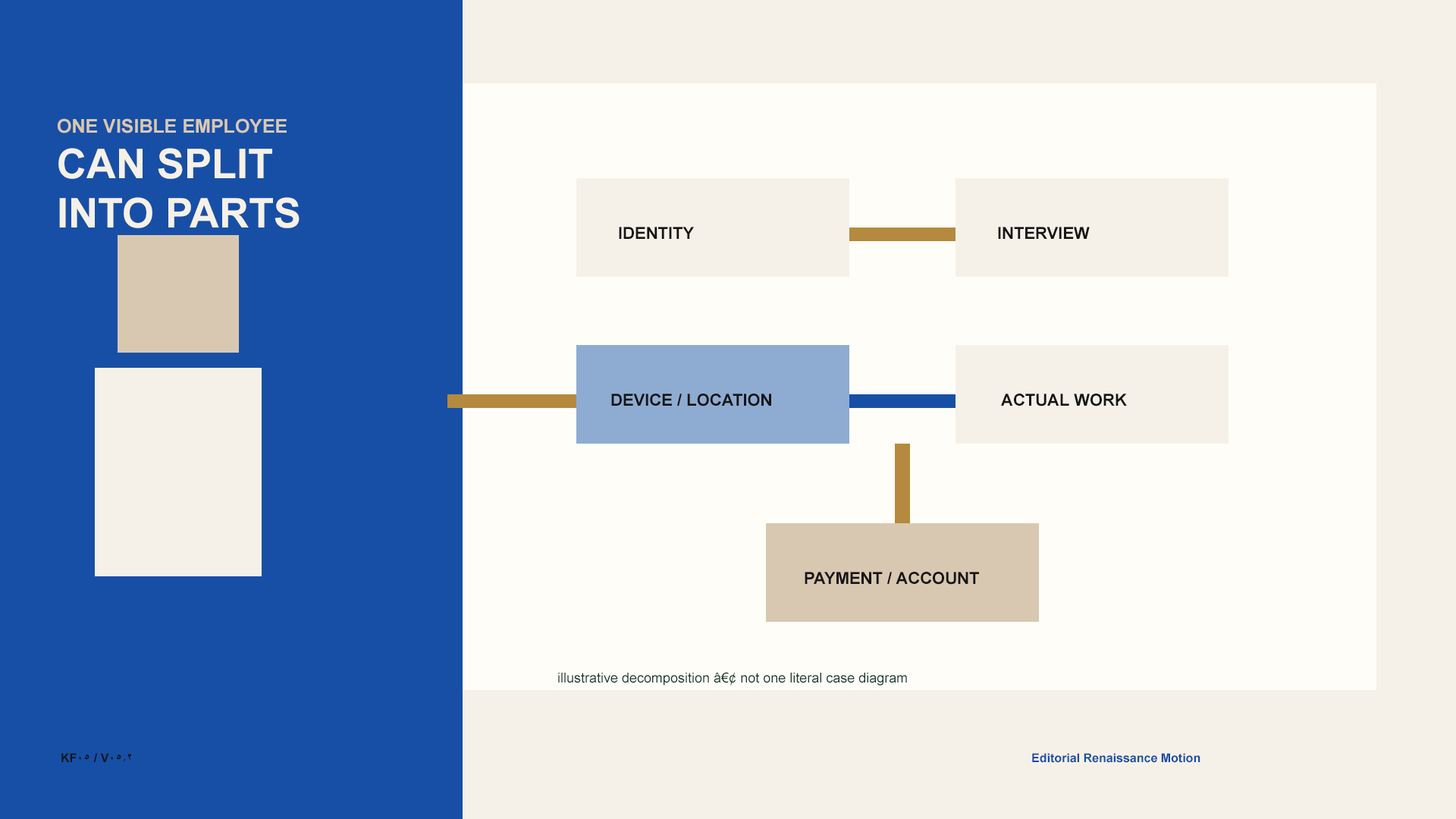
<style>
.page{position:relative;width:1456px;height:819px;background:#fffdf8}
.page>*{position:absolute;margin:0}
.t1{font:19px "Arial-BoldMT";color:#d9c8b1}
.t2{font:40.9px "Arial-BoldMT";color:#f6f1e8}
.t3{font:16.7px "Arial-BoldMT";color:#151515}
.t4{font:13.6px "ArialMT";color:#173c32}
.t5{font:12.1px "Arial-BoldMT";color:#151515}
.t6{font:12.1px "Arial-BoldMT";color:#174fa6}
</style>
<div class="page">
<p class="t1" style="left:58px;top:118px;width:229px;height:15px">ONE VISIBLE EMPLOYEE</p>
<p class="t2" style="left:58px;top:148px;width:214px;height:31px">CAN SPLIT</p>
<p class="t2" style="left:59px;top:197px;width:241px;height:31px">INTO PARTS</p>
<p class="t3" style="left:619px;top:227px;width:75px;height:12px">IDENTITY</p>
<p class="t3" style="left:998px;top:227px;width:92px;height:12px">INTERVIEW</p>
<p class="t3" style="left:611px;top:394px;width:160px;height:12px">DEVICE / LOCATION</p>
<p class="t3" style="left:1001px;top:394px;width:126px;height:12px">ACTUAL WORK</p>
<p class="t3" style="left:805px;top:572px;width:174px;height:13px">PAYMENT / ACCOUNT</p>
<p class="t4" style="left:558px;top:672px;width:349px;height:14px">illustrative decomposition â€¢ not one literal case diagram</p>
<p class="t5" style="left:61px;top:753px;width:70px;height:9px">KF05 / V05.2</p>
<p class="t6" style="left:1032px;top:753px;width:168px;height:10px">Editorial Renaissance Motion</p>
</div>
